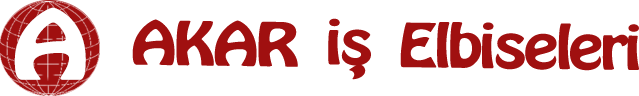
<style>
.page{position:relative;width:639px;height:96px;background:#ffffff}
.page>*{position:absolute;margin:0}
.t1{font:84.7px "HoboStd";letter-spacing:-0.05em;color:#ffffff;scale:1.32 1}
.t2{font:53.3px "HoboStd";letter-spacing:-0.05em;color:#a01010;scale:1.23 1}
</style>
<div class="page">
<p class="t1" style="left:14px;top:7px;width:72px;height:73px">A</p>
<p class="t2" style="left:132px;top:19px;width:166px;height:48px;rotate:1deg">AKAR</p>
<p class="t2" style="left:328px;top:18px;width:43px;height:48px;rotate:1deg">is</p>
<p class="t2" style="left:400px;top:22px;width:239px;height:49px;rotate:1deg">Elbiseleri</p>
<p class="t2" style="left:349px;top:64px;width:17px;height:16px;rotate:1deg">,</p>
</div>
